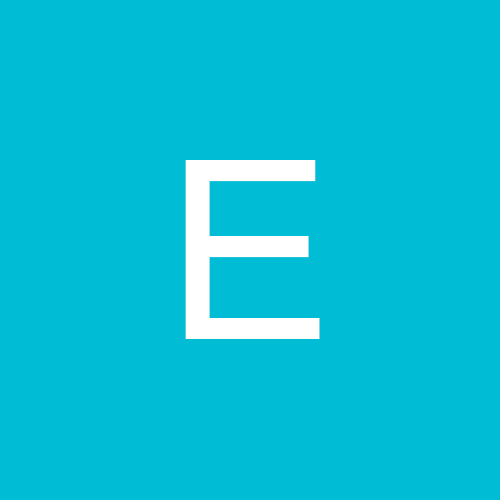
<style>
.page{position:relative;width:500px;height:500px;background:#00bcd4}
.page>*{position:absolute;margin:0}
.t1{font:250px "ArialMT";color:#ffffff}
</style>
<div class="page">
<p class="t1" style="left:185px;top:160px;width:135px;height:179px">E</p>
</div>
